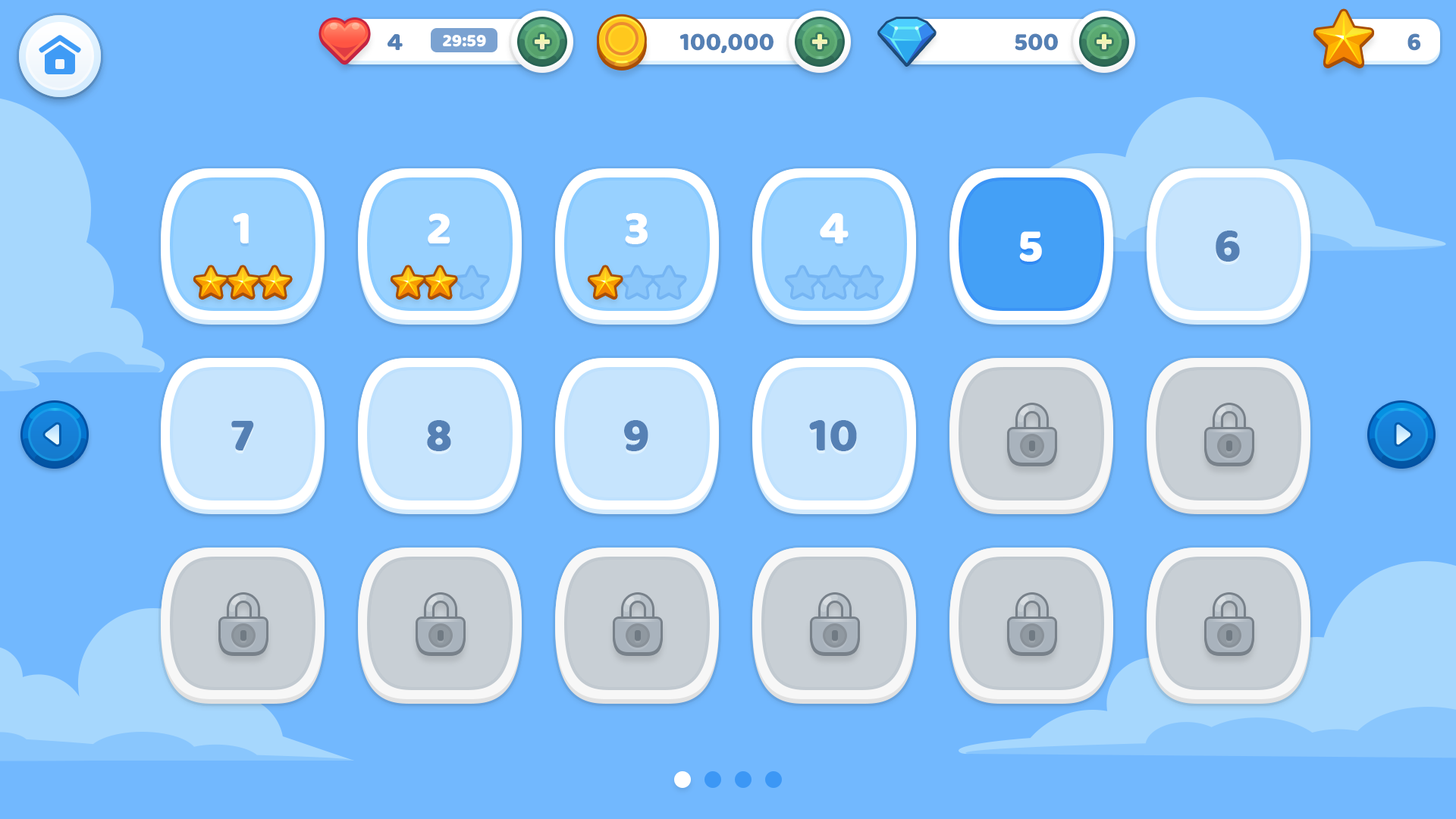
<style>
.page{position:relative;width:1456px;height:819px;background:#72b8fe}
.page>*{position:absolute;margin:0}
.t1{font:25.8px "BalooBhaijaan-Regular";color:#5580b4;text-transform:uppercase}
.t2{font:18.2px "BalooBhaijaan-Regular";color:#ffffff;text-transform:uppercase}
.t3{font:48.5px "BalooBhaijaan-Regular";color:#ffffff;text-transform:uppercase}
.t4{font:48.5px "BalooBhaijaan-Regular";color:#5580b4;text-transform:uppercase}
</style>
<div class="page">
<p class="t1" style="left:388px;top:33px;width:15px;height:17px">4</p>
<p class="t2" style="left:443px;top:35px;width:43px;height:12px">29:59</p>
<p class="t1" style="left:679px;top:33px;width:94px;height:20px">100,000</p>
<p class="t1" style="left:1015px;top:33px;width:43px;height:18px">500</p>
<p class="t1" style="left:1407px;top:33px;width:14px;height:18px">6</p>
<p class="t3" style="left:233px;top:213px;width:16px;height:30px">1</p>
<p class="t3" style="left:428px;top:213px;width:22px;height:30px">2</p>
<p class="t3" style="left:625px;top:213px;width:23px;height:31px">3</p>
<p class="t3" style="left:820px;top:213px;width:29px;height:30px">4</p>
<p class="t3" style="left:1019px;top:231px;width:23px;height:31px">5</p>
<p class="t4" style="left:1216px;top:231px;width:24px;height:31px">6</p>
<p class="t4" style="left:231px;top:421px;width:23px;height:29px">7</p>
<p class="t4" style="left:427px;top:420px;width:24px;height:31px">8</p>
<p class="t4" style="left:624px;top:420px;width:24px;height:31px">9</p>
<p class="t4" style="left:809px;top:420px;width:48px;height:31px">10</p>
</div>
